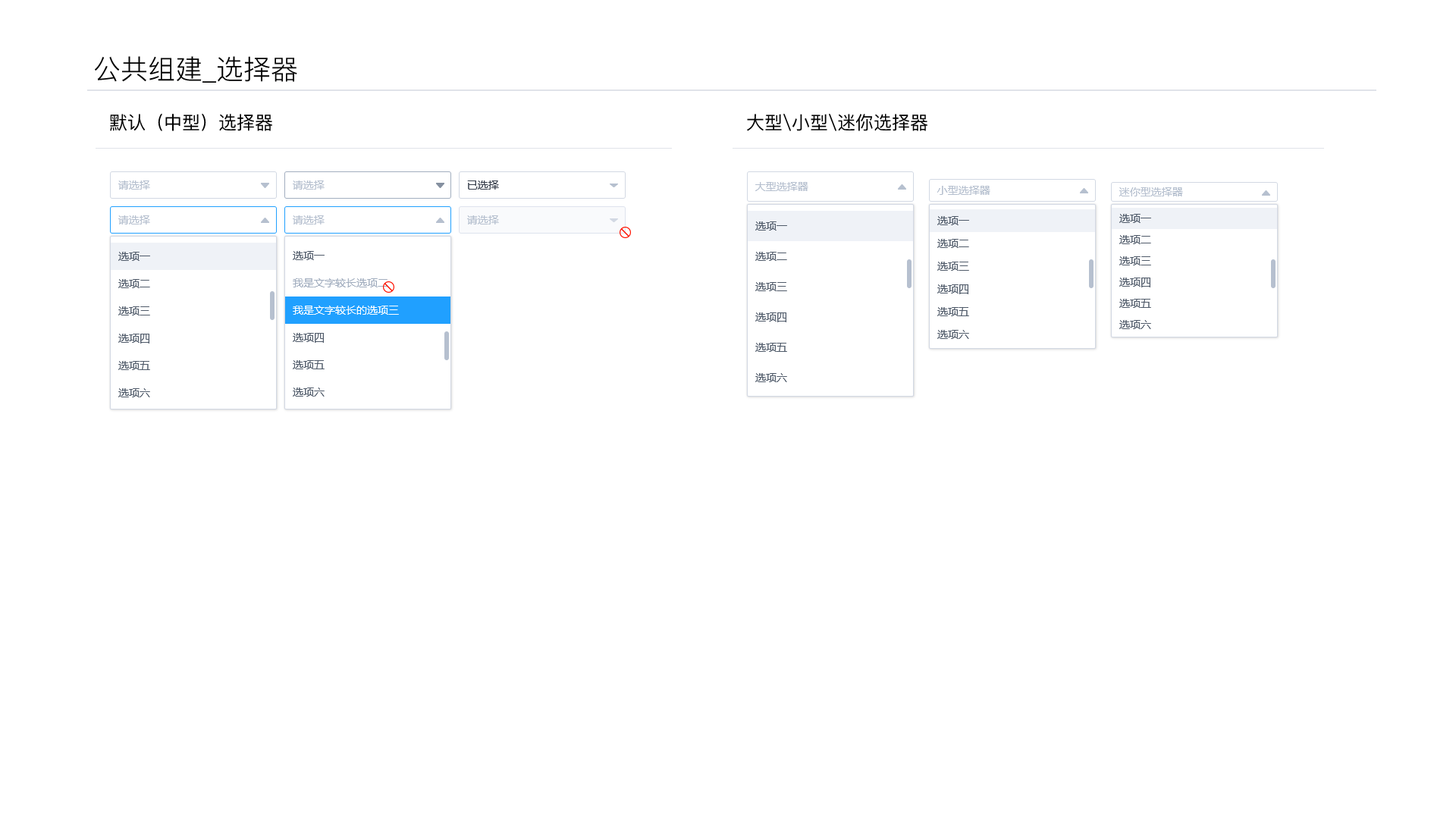
<style>
.page{position:relative;width:1456px;height:819px;background:#ffffff}
.page>*{position:absolute;margin:0}
.t1{font:27.3px "PingFang-SC-Regular";color:#000000}
.t2{font:18.2px "PingFang-SC-Medium";color:#000000}
.t3{font:10.6px "MicrosoftYaHei";color:#b6c0cf}
.t4{font:10.6px "MicrosoftYaHei";color:#373e4b}
.t5{font:10.6px/33.4px "MicrosoftYaHei";color:#4f5a69}
.t6{font:10.6px/25.8px "MicrosoftYaHei";color:#4f5a69}
.t7{font:10.6px/24.3px "MicrosoftYaHei";color:#4f5a69}
.t8{font:10.6px/30.3px "MicrosoftYaHei";color:#4f5a69}
.t9{font:10.6px/30.3px "MicrosoftYaHei";color:#a2aebf}
.t10{font:10.6px/30.3px "MicrosoftYaHei";color:#ffffff}
</style>
<div class="page">
<p class="t1" style="left:95px;top:56px;width:202px;height:27px">公共组建_选择器</p>
<p class="t2" style="left:110px;top:114px;width:162px;height:17px">默认（中型）选择器</p>
<p class="t2" style="left:747px;top:114px;width:180px;height:17px">大型\小型\迷你选择器</p>
<p class="t3" style="left:118px;top:180px;width:32px;height:10px">请选择</p>
<p class="t3" style="left:293px;top:180px;width:32px;height:10px">请选择</p>
<p class="t4" style="left:467px;top:180px;width:32px;height:10px">已选择</p>
<p class="t3" style="left:755px;top:182px;width:53px;height:9px">大型选择器</p>
<p class="t3" style="left:937px;top:186px;width:53px;height:9px">小型选择器</p>
<p class="t3" style="left:1119px;top:187px;width:64px;height:9px">迷你型选择器</p>
<p class="t3" style="left:118px;top:215px;width:32px;height:9px">请选择</p>
<p class="t3" style="left:293px;top:215px;width:32px;height:9px">请选择</p>
<p class="t3" style="left:467px;top:215px;width:32px;height:9px">请选择</p>
<p class="t5" style="left:755px;top:221px;width:32px;height:161px">选项一<br>选项二<br>选项三<br>选项四<br>选项五<br>选项六</p>
<p class="t6" style="left:937px;top:216px;width:32px;height:123px">选项一<br>选项二<br>选项三<br>选项四<br>选项五<br>选项六</p>
<p class="t7" style="left:1119px;top:214px;width:32px;height:115px">选项一<br>选项二<br>选项三<br>选项四<br>选项五<br>选项六</p>
<p class="t8" style="left:118px;top:252px;width:32px;height:145px">选项一<br>选项二<br>选项三<br>选项四<br>选项五<br>选项六</p>
<p class="t8" style="left:293px;top:251px;width:106px;height:146px">选项一<br><span class="t9">我是文字较长选项二<br></span><span class="t10">我是文字较长的选项三<br></span>选项四<br>选项五<br>选项六</p>
</div>
